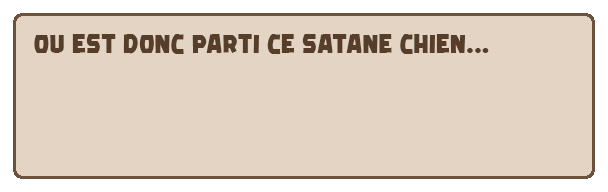
<style>
.page{position:relative;width:608px;height:192px;background:#e3d4c3}
.page>*{position:absolute;margin:0}
.t1{font:24.2px "Golden-Smile";color:#573e2b}
</style>
<div class="page">
<p class="t1" style="left:34px;top:34px;width:455px;height:20px">Ou est donc parti ce satane chien...</p>
</div>
